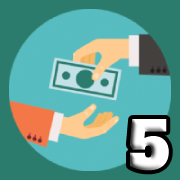
<style>
.page{position:relative;width:180px;height:180px;background:#2c7c6e}
.page>*{position:absolute;margin:0}
.t1{font:64px "AlfaSlabOne-Regular";color:#ffffff}
</style>
<div class="page">
<p class="t1" style="left:129px;top:118px;width:40px;height:53px">5</p>
</div>
